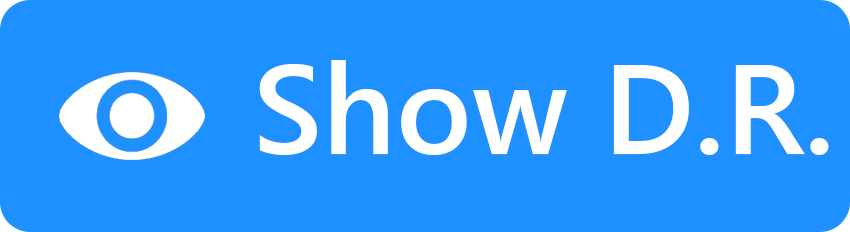
<style>
.page{position:relative;width:850px;height:232px;background:#1e90ff}
.page>*{position:absolute;margin:0}
.t1{font:127px "SegoeUI-Semibold";color:#ffffff}
</style>
<div class="page">
<p class="t1" style="left:259px;top:60px;width:570px;height:95px">Show D.R.</p>
</div>
